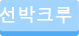
<style>
.page{position:relative;width:79px;height:36px;background:#a1d4fe}
.page>*{position:absolute;margin:0}
.t1{font:18px "H2gtrM";color:#ffffff;font-weight:bold}
</style>
<div class="page">
<p class="t1" style="left:0px;top:6px;width:72px;height:18px">선박크루즈</p>
</div>
